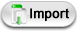
<style>
.page{position:relative;width:77px;height:31px}
.page>*{position:absolute;margin:0}
.t1{font:13.3px "ArialMT";color:#000000;font-weight:bold}
</style>
<div class="page">
<p class="t1" style="left:30px;top:8px;width:39px;height:13px">Import</p>
</div>
